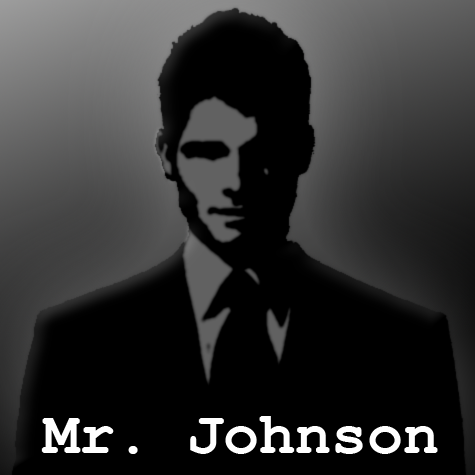
<style>
.page{position:relative;width:475px;height:475px;background:#000000}
.page>*{position:absolute;margin:0}
.t1{font:60px "CourierNewPS-BoldMT";color:#ffffff}
</style>
<div class="page">
<p class="t1" style="left:41px;top:416px;width:397px;height:38px">Mr. Johnson</p>
</div>
